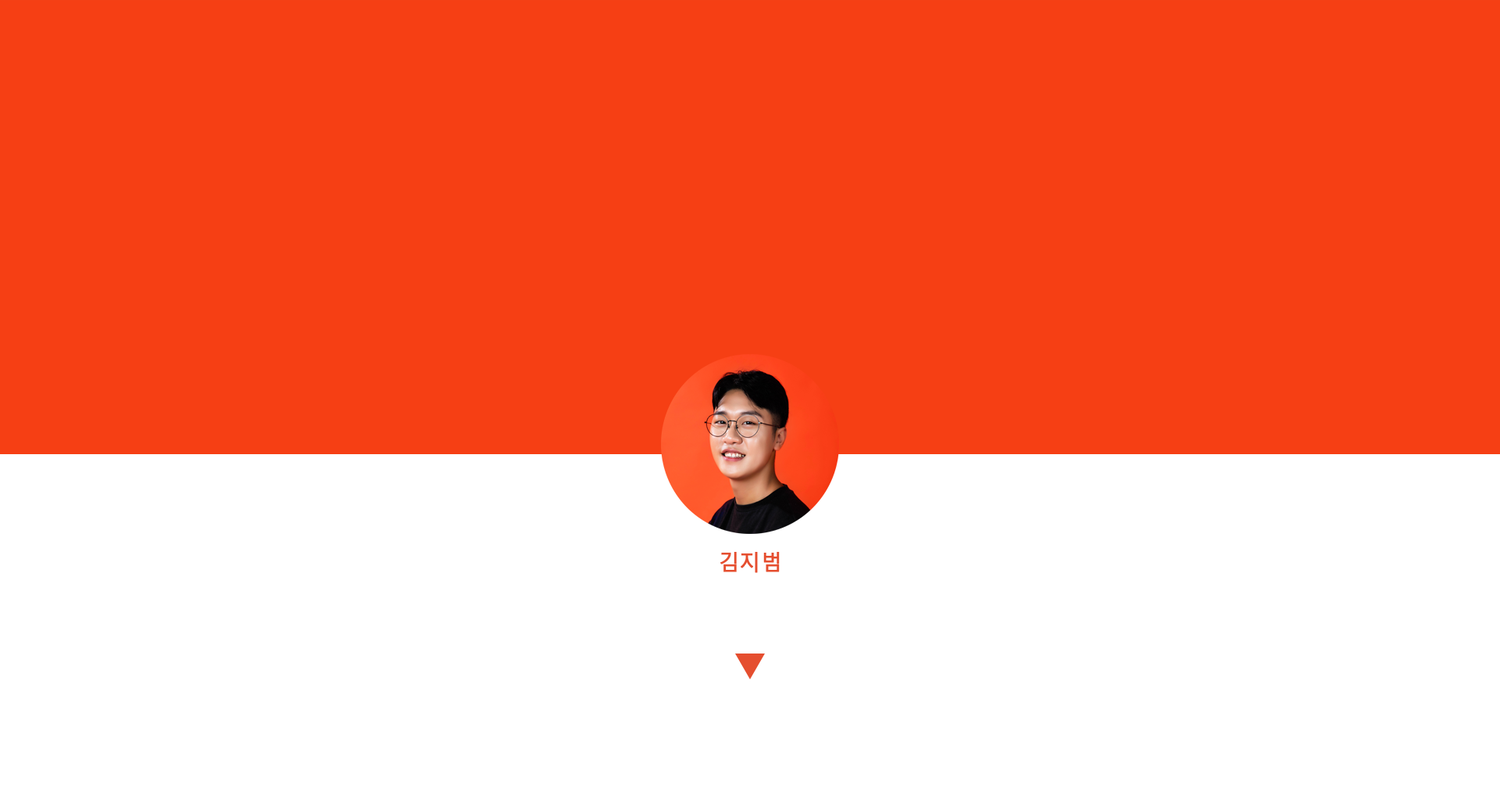
<style>
.page{position:relative;width:1500px;height:795px;background:#f63f14}
.page>*{position:absolute;margin:0}
.t1{font:20.8px "MalgunGothic";color:#e54e2f;font-weight:bold}
</style>
<div class="page">
<p class="t1" style="left:721px;top:552px;width:59px;height:21px">김지범</p>
</div>
